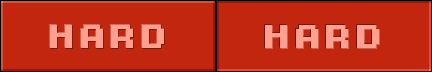
<style>
.page{position:relative;width:432px;height:72px;background:#c2260e}
.page>*{position:absolute;margin:0}
.t1{font:30px "KongtextRegular";letter-spacing:0.022em;color:#ffa091}
</style>
<div class="page">
<p class="t1" style="left:50px;top:25px;width:114px;height:23px">HARD</p>
<p class="t1" style="left:265px;top:25px;width:114px;height:23px">HARD</p>
</div>
